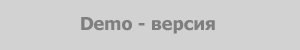
<style>
.page{position:relative;width:300px;height:50px;background:#d2d2d2}
.page>*{position:absolute;margin:0}
.t1{font:18px "Tahoma-Bold";color:#7f7f7f}
</style>
<div class="page">
<p class="t1" style="left:81px;top:17px;width:134px;height:17px">Demo - версия</p>
</div>
